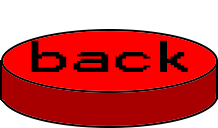
<style>
.page{position:relative;width:218px;height:128px;background:#ffffff}
.page>*{position:absolute;margin:0}
.t1{font:35.6px "Terminal";color:#000000;scale:1.57 1}
</style>
<div class="page">
<p class="t1" style="left:31px;top:40px;width:157px;height:32px">back</p>
</div>
